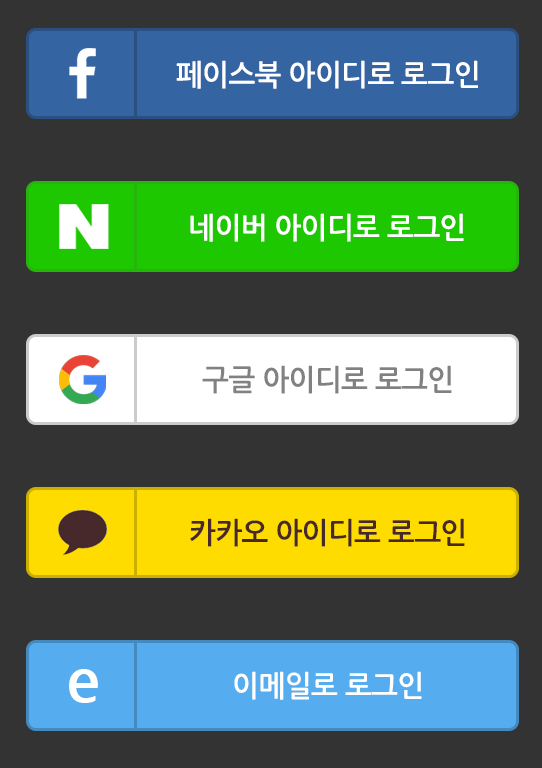
<style>
.page{position:relative;width:542px;height:768px;background:#333333}
.page>*{position:absolute;margin:0}
.t1{font:29.3px "NanumGothicBold";letter-spacing:-0.015em;color:#ffffff;scale:0.97 1}
.t2{font:29.3px "NanumGothicBold";letter-spacing:-0.015em;color:#818181;scale:0.97 1}
.t3{font:29.3px "NanumGothicBold";letter-spacing:-0.015em;color:#47292b;scale:0.97 1}
.t4{font:62.9px "NanumGothicBold";color:#ffffff}
</style>
<div class="page">
<p class="t1" style="left:176px;top:60px;width:302px;height:29px">페이스북 아이디로 로그인</p>
<p class="t1" style="left:190px;top:213px;width:274px;height:29px">네이버 아이디로 로그인</p>
<p class="t2" style="left:202px;top:365px;width:250px;height:29px">구글 아이디로 로그인</p>
<p class="t3" style="left:190px;top:518px;width:275px;height:29px">카카오 아이디로 로그인</p>
<p class="t4" style="left:69px;top:669px;width:29px;height:34px">e</p>
<p class="t1" style="left:234px;top:671px;width:188px;height:29px">이메일로 로그인</p>
</div>
